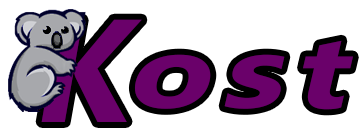
<style>
.page{position:relative;width:364px;height:139px;background:#ffffff}
.page>*{position:absolute;margin:0}
.t1{font:145.9px "Ebrima-Bold";letter-spacing:0.085em;color:#6a016a;font-style:italic}
.t2{font:102.7px "Ebrima-Bold";letter-spacing:0.085em;color:#6a016a;font-style:italic;scale:1.32 1}
</style>
<div class="page">
<p class="t1" style="left:41px;top:19px;width:101px;height:103px">K</p>
<p class="t2" style="left:134px;top:40px;width:219px;height:70px">ost</p>
</div>
